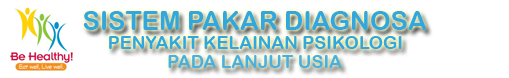
<style>
.page{position:relative;width:509px;height:78px;background:#ffffff}
.page>*{position:absolute;margin:0}
.t1{font:26px "ArialRoundedMTBold";color:#31a7de}
.t2{font:18px "ArialRoundedMTBold";color:#31a7de}
</style>
<div class="page">
<p class="t1" style="left:83px;top:11px;width:343px;height:19px">SISTEM PAKAR DIAGNOSA</p>
<p class="t2" style="left:109px;top:36px;width:293px;height:13px">PENYAKIT KELAINAN PSIKOLOGI</p>
<p class="t2" style="left:168px;top:55px;width:174px;height:13px">PADA LANJUT USIA</p>
</div>
